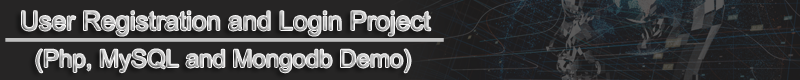
<style>
.page{position:relative;width:800px;height:80px;background:#262525}
.page>*{position:absolute;margin:0}
.t1{font:26px "ArialMT";color:#bfbfbf}
.t2{font:24px "ArialMT";color:#bfbfbf}
</style>
<div class="page">
<p class="t1" style="left:22px;top:11px;width:409px;height:25px">User Registration and Login Project</p>
<p class="t2" style="left:36px;top:49px;width:375px;height:24px">(Php, MySQL and Mongodb Demo)</p>
</div>
